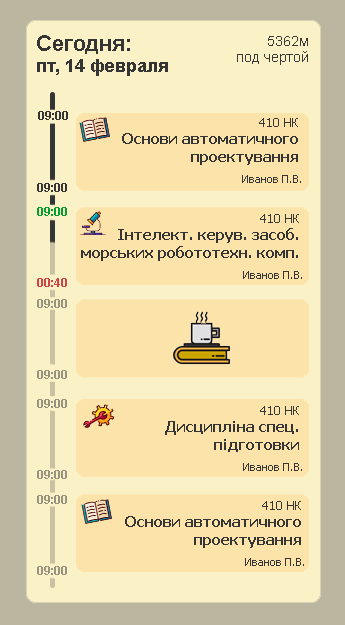
<style>
.page{position:relative;width:345px;height:625px;background:#fce3a9}
.page>*{position:absolute;margin:0}
.t1{font:18px "Arial-BoldMT";color:#353535}
.t2{font:22px "Arial-BoldMT";color:#353535}
.t3{font:14px "ArialMT";color:#393939}
.t4{font:12px "Arial-BoldMT";color:#363636}
.t5{font:12px "Tahoma";color:#353535}
.t6{font:15px "Tahoma-Bold";color:#353535}
.t7{font:11px "Tahoma";color:#353535}
.t8{font:12px "Arial-BoldMT";color:#079e31}
.t9{font:12px "Arial-BoldMT";color:#d24444}
.t10{font:12px "Arial-BoldMT";color:#98937e}
</style>
<div class="page">
<p class="t1" style="left:37px;top:35px;width:131px;height:41px;text-align:right"><span class="t2">Сегодня:<br></span>пт, 14 февраля</p>
<p class="t3" style="left:268px;top:36px;width:40px;height:10px">5362м</p>
<p class="t3" style="left:237px;top:51px;width:71px;height:14px">под чертой</p>
<p class="t4" style="left:38px;top:111px;width:30px;height:9px">09:00</p>
<p class="t4" style="left:38px;top:111px;width:30px;height:9px">09:00</p>
<p class="t5" style="left:259px;top:118px;width:39px;height:9px">410 НК</p>
<p class="t6" style="left:122px;top:133px;width:176px;height:32px">Основи автоматичного проектування</p>
<p class="t4" style="left:37px;top:183px;width:30px;height:9px">09:00</p>
<p class="t4" style="left:37px;top:183px;width:30px;height:9px">09:00</p>
<p class="t7" style="left:242px;top:175px;width:59px;height:8px">Иванов П.В.</p>
<p class="t8" style="left:37px;top:207px;width:30px;height:9px">09:00</p>
<p class="t8" style="left:37px;top:207px;width:30px;height:9px">09:00</p>
<p class="t5" style="left:260px;top:214px;width:39px;height:9px">410 НК</p>
<p class="t6" style="left:81px;top:228px;width:217px;height:33px">Інтелект. керув. засоб. морських робототехн. комп.</p>
<p class="t9" style="left:37px;top:278px;width:30px;height:9px">00:40</p>
<p class="t7" style="left:243px;top:271px;width:59px;height:8px">Иванов П.В.</p>
<p class="t10" style="left:37px;top:299px;width:30px;height:9px">09:00</p>
<p class="t10" style="left:37px;top:370px;width:30px;height:9px">09:00</p>
<p class="t10" style="left:37px;top:399px;width:30px;height:9px">09:00</p>
<p class="t5" style="left:260px;top:406px;width:39px;height:9px">410 НК</p>
<p class="t6" style="left:165px;top:421px;width:134px;height:31px">Дисципліна спец. підготовки</p>
<p class="t10" style="left:37px;top:470px;width:30px;height:9px">09:00</p>
<p class="t7" style="left:243px;top:463px;width:59px;height:8px">Иванов П.В.</p>
<p class="t10" style="left:37px;top:495px;width:30px;height:9px">09:00</p>
<p class="t5" style="left:262px;top:501px;width:39px;height:9px">410 НК</p>
<p class="t6" style="left:125px;top:516px;width:176px;height:32px">Основи автоматичного проектування</p>
<p class="t7" style="left:245px;top:558px;width:59px;height:8px">Иванов П.В.</p>
<p class="t10" style="left:37px;top:566px;width:30px;height:9px">09:00</p>
</div>
